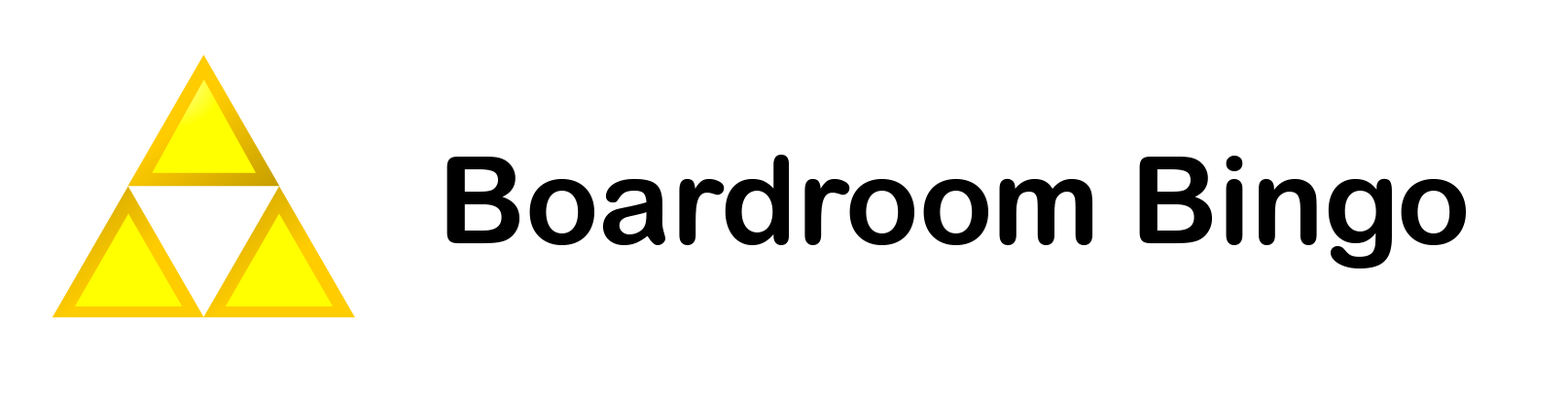
<style>
.page{position:relative;width:1568px;height:393px;background:#ffffff}
.page>*{position:absolute;margin:0}
.t1{font:121.6px "ArialRoundedMTBold";color:#000000}
</style>
<div class="page">
<p class="t1" style="left:446px;top:155px;width:1020px;height:113px">Boardroom Bingo</p>
</div>
